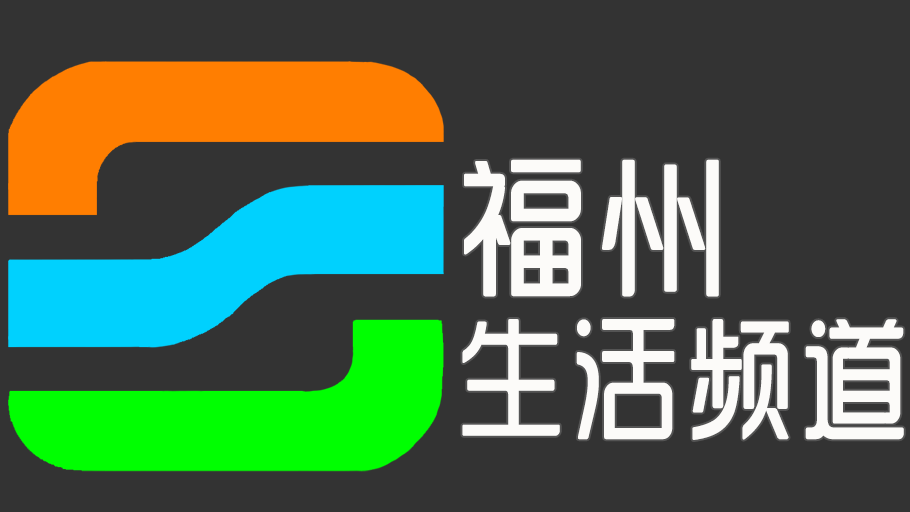
<style>
.page{position:relative;width:910px;height:512px;background:#333333}
.page>*{position:absolute;margin:0}
.t1{font:132px/160px "SJyunlvyuan";letter-spacing:0.02em;color:#fcfbf9;scale:0.85 1}
.t2{font:150px/160px "SJyunlvyuan";letter-spacing:0.02em;color:#fcfbf9;scale:0.9 1}
</style>
<div class="page">
<p class="t1" style="left:462px;top:159px;width:442px;height:281px"><span class="t2">福州<br></span>生活频道</p>
</div>
